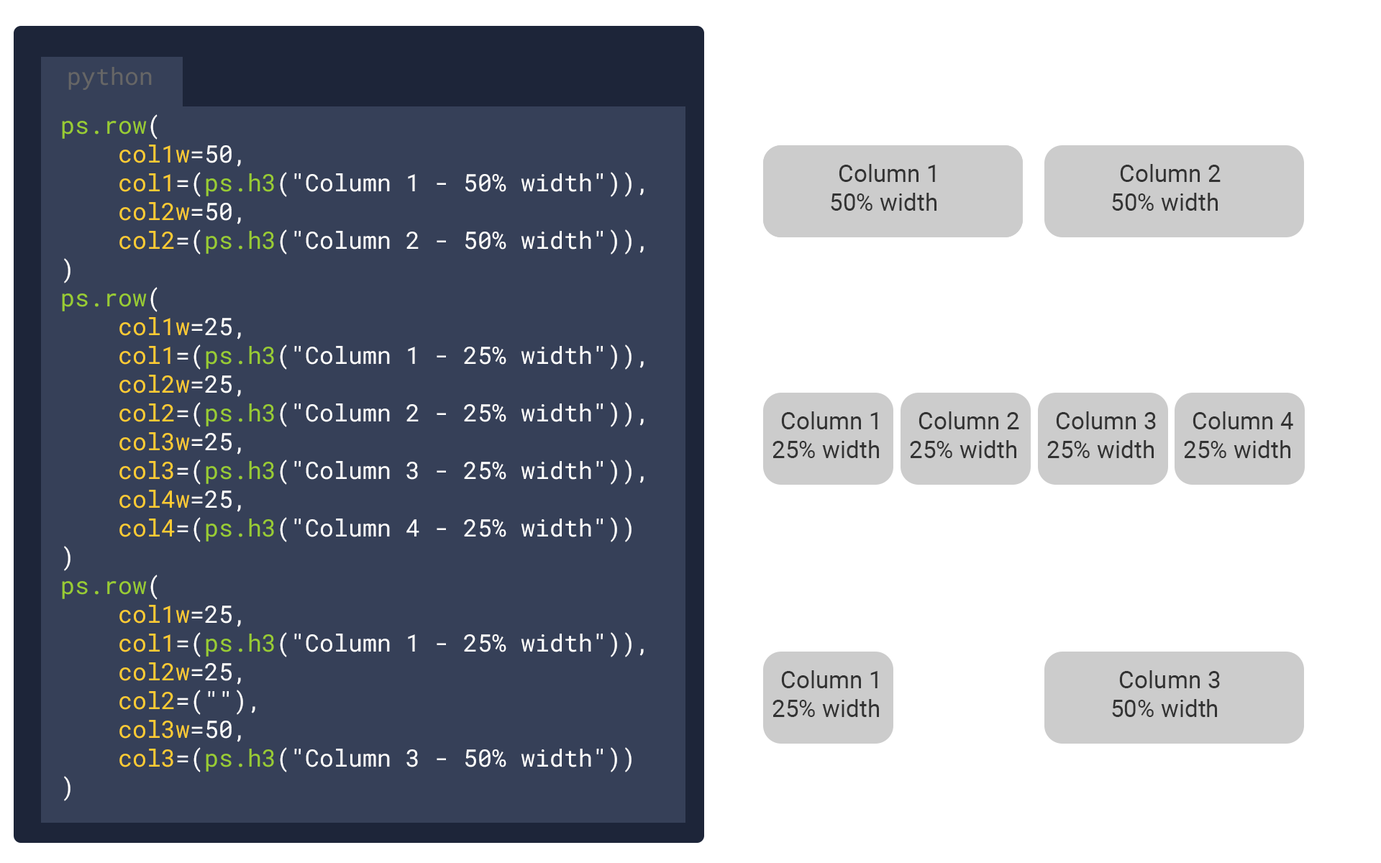
<style>
.page{position:relative;width:1381px;height:863px;background:#ffffff}
.page>*{position:absolute;margin:0}
.t1{font:24px "RobotoMono-Regular";color:#666666}
.t2{font:24px "RobotoMono-Regular";color:#ffffff}
.t3{font:24px "RobotoMono-Regular";color:#99cc33}
.t4{font:24px "RobotoMono-Regular";color:#ffcc33}
.t5{font:24px "Roboto-Regular";color:#333333}
</style>
<div class="page">
<p class="t1" style="left:68px;top:67px;width:84px;height:23px">python</p>
<p class="t2" style="left:62px;top:114px;width:582px;height:687px"><span class="t3">ps.row</span>(<br>    <span class="t4">col1w</span>=50,<br>    <span class="t4">col1</span>=(<span class="t3">ps.h3</span>("Column 1 - 50% width")),<br>    <span class="t4">col2w</span>=50,<br>    <span class="t4">col2</span>=(<span class="t3">ps.h3</span>("Column 2 - 50% width")),<br>)<br><span class="t3">ps.row</span>(<br>    <span class="t4">col1w</span>=25,<br><span class="t4">    col1</span>=(<span class="t3">ps.h3</span>("Column 1 - 25% width")),<br>    <span class="t4">col2w</span>=25,<br>    <span class="t4">col2</span>=(<span class="t3">ps.h3</span>("Column 2 - 25% width")),<br>    <span class="t4">col3w</span>=25,<br>    <span class="t4">col3</span>=(<span class="t3">ps.h3</span>("Column 3 - 25% width")),<br>    <span class="t4">col4w</span>=25,<br>    <span class="t4">col4</span>=(<span class="t3">ps.h3</span>("Column 4 - 25% width"))<br>)<br><span class="t3">ps.row</span>(<br>    <span class="t4">col1w</span>=25,<br>    <span class="t4">col1</span>=(<span class="t3">ps.h3</span>("Column 1 - 25% width")),<br>    <span class="t4">col2w</span>=25,<br>    <span class="t4">col2</span>=(""),<br>    <span class="t4">col3w</span>=50,<br>    <span class="t4">col3</span>=(<span class="t3">ps.h3</span>("Column 3 - 50% width"))<br>)</p>
<p class="t5" style="left:831px;top:164px;width:106px;height:47px">Column 1 <br>50% width</p>
<p class="t5" style="left:831px;top:164px;width:106px;height:47px">Column 1 <br>50% width</p>
<p class="t5" style="left:1112px;top:164px;width:109px;height:47px">Column 2 <br>50% width</p>
<p class="t5" style="left:773px;top:412px;width:106px;height:46px">Column 1 <br>25% width</p>
<p class="t5" style="left:910px;top:412px;width:109px;height:46px">Column 2 <br>25% width</p>
<p class="t5" style="left:1047px;top:412px;width:109px;height:46px">Column 3 <br>25% width</p>
<p class="t5" style="left:1184px;top:412px;width:109px;height:46px">Column 4 <br>25% width</p>
<p class="t5" style="left:773px;top:670px;width:106px;height:47px">Column 1 <br>25% width</p>
<p class="t5" style="left:1112px;top:670px;width:108px;height:47px">Column 3 <br>50% width</p>
</div>
